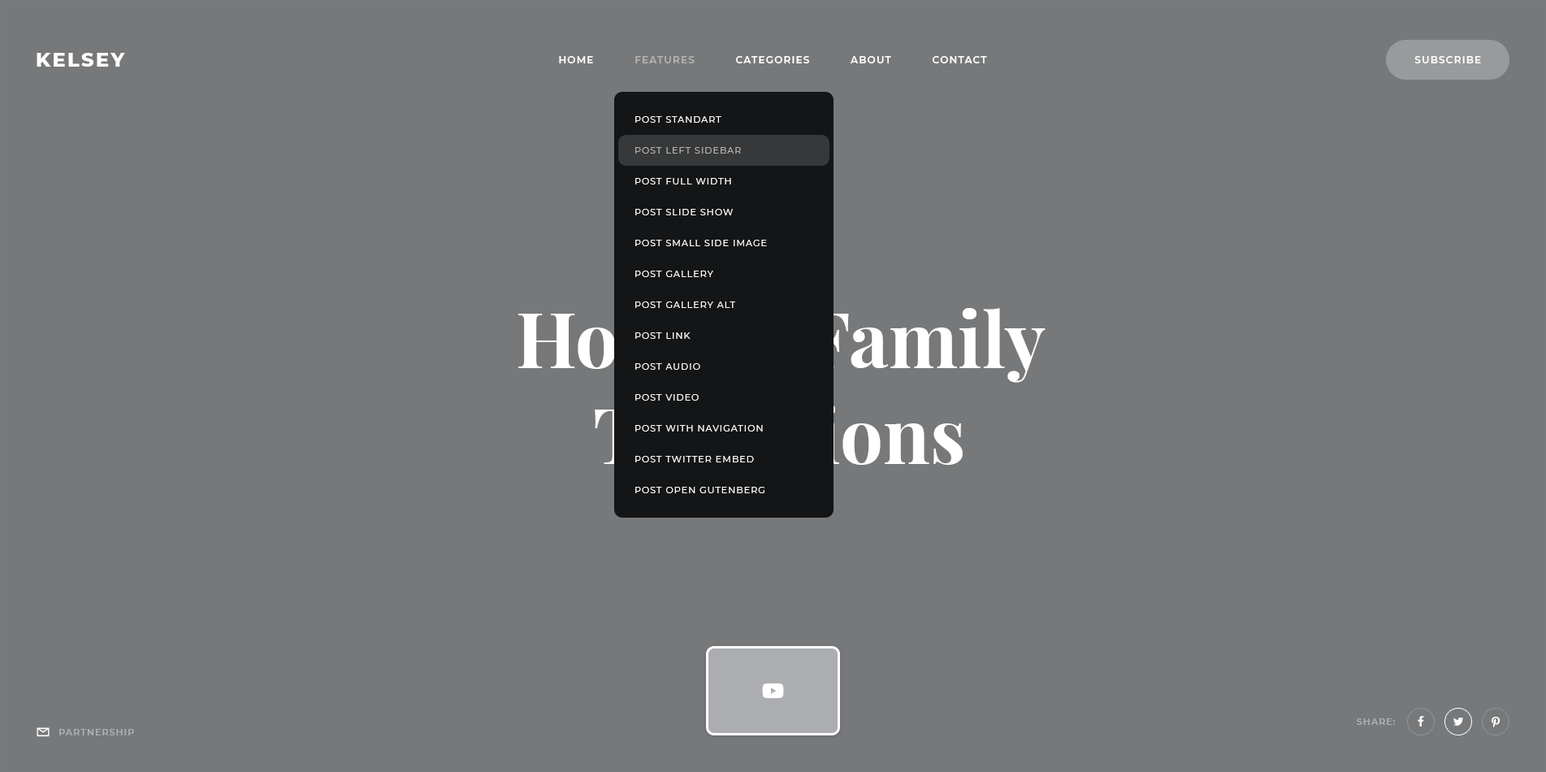
<style>
.page{position:relative;width:1546px;height:772px;background:#76787a}
.page>*{position:absolute;margin:0}
.t1{font:19.5px "Montserrat-ExtraBold";letter-spacing:0.1em;color:#ffffff;text-transform:uppercase}
.t2{font:9.7px "Montserrat-SemiBold";letter-spacing:0.1em;color:#ffffff;text-transform:uppercase}
.t3{font:9.7px "Montserrat-SemiBold";letter-spacing:0.1em;color:#b3b3b3;text-transform:uppercase}
.t4{font:8.9px/30.9px "Montserrat-Regular";letter-spacing:0.1em;color:#ffffff;text-transform:uppercase}
.t5{font:8.9px/30.9px "Montserrat-Regular";letter-spacing:0.1em;color:#b3b3b3;text-transform:uppercase}
.t6{font:8.9px "Montserrat-SemiBold";letter-spacing:0.1em;color:#b0b1b2;text-transform:uppercase}
</style>
<div class="page">
<p class="t1" style="left:37px;top:53px;width:88px;height:14px">Kelsey</p>
<p class="t2" style="left:559px;top:56px;width:428px;height:7px">Home           <span class="t3">Features</span>           Categories           About           Contact</p>
<p class="t2" style="left:1414px;top:56px;width:67px;height:7px">Subscribe</p>
<p class="t4" style="left:635px;top:116px;width:132px;height:377px">Post Standart<br><span class="t5">Post Left Sidebar<br></span>Post Full Width<br>Post Slide Show<br>Post Small Side Image<br>Post Gallery<br>Post Gallery Alt<br>Post Link<br>Post Audio<br>Post Video<br>Post With Navigation<br>Post Twitter Embed<br>Post Open Gutenberg</p>
<p class="t6" style="left:1356px;top:718px;width:38px;height:6px">Share:</p>
<p class="t6" style="left:59px;top:728px;width:75px;height:7px">Partnership</p>
</div>
